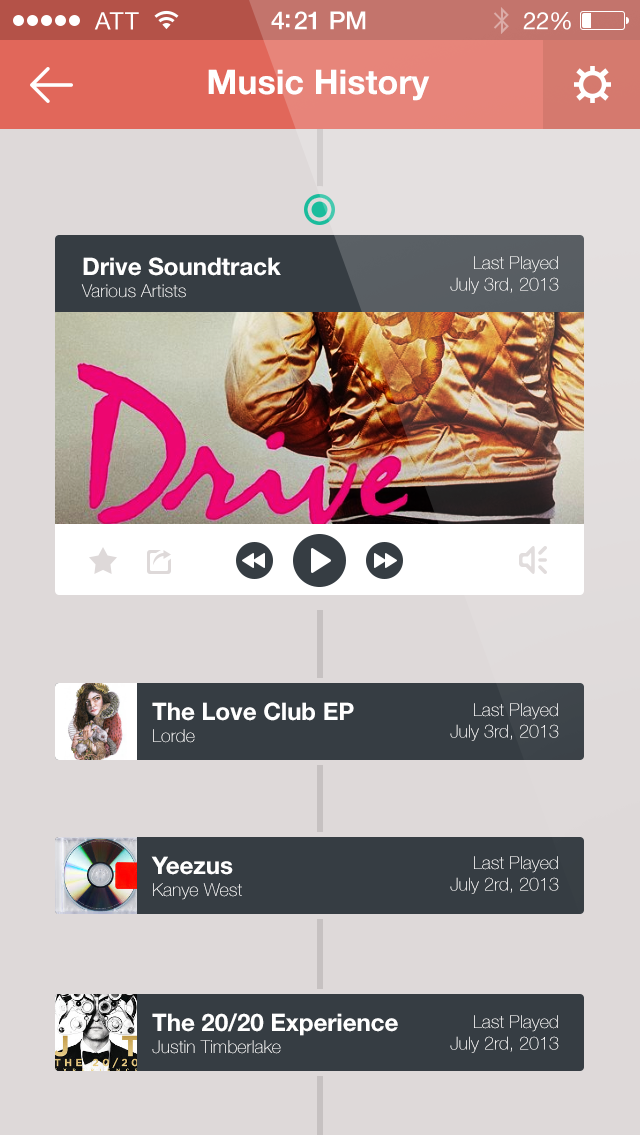
<style>
.page{position:relative;width:640px;height:1135px;background:#ded9d9}
.page>*{position:absolute;margin:0}
.t1{font:34px "HelveticaNeueLTStd-Bd";color:#ffffff}
.t2{font:24px/36px "HelveticaNeueLTStd-Bd";color:#ffffff}
.t3{font:18px/22px "HelveticaNeueLTStd-Th";color:#ffffff}
.t4{font:18px "HelveticaNeueLTStd-Th";color:#ffffff}
</style>
<div class="page">
<p class="t1" style="left:208px;top:69px;width:222px;height:32px">Music History</p>
<p class="t2" style="left:81px;top:257px;width:200px;height:41px">Drive Soundtrack<br><span class="t3">Various Artists</span></p>
<p class="t4" style="left:450px;top:256px;width:109px;height:38px;text-align:right">Last Played<br>July 3rd, 2013</p>
<p class="t2" style="left:152px;top:702px;width:202px;height:41px">The Love Club EP<br><span class="t3">Lorde</span></p>
<p class="t4" style="left:450px;top:703px;width:109px;height:38px;text-align:right">Last Played<br>July 3rd, 2013</p>
<p class="t3" style="left:151px;top:856px;width:91px;height:44px"><span class="t2">Yeezus<br></span>Kanye West</p>
<p class="t4" style="left:450px;top:856px;width:109px;height:38px;text-align:right">Last Played<br>July 2rd, 2013</p>
<p class="t2" style="left:152px;top:1013px;width:246px;height:41px">The 20/20 Experience<br><span class="t3">Justin Timberlake</span></p>
<p class="t4" style="left:450px;top:1015px;width:109px;height:38px;text-align:right">Last Played<br>July 2rd, 2013</p>
</div>
